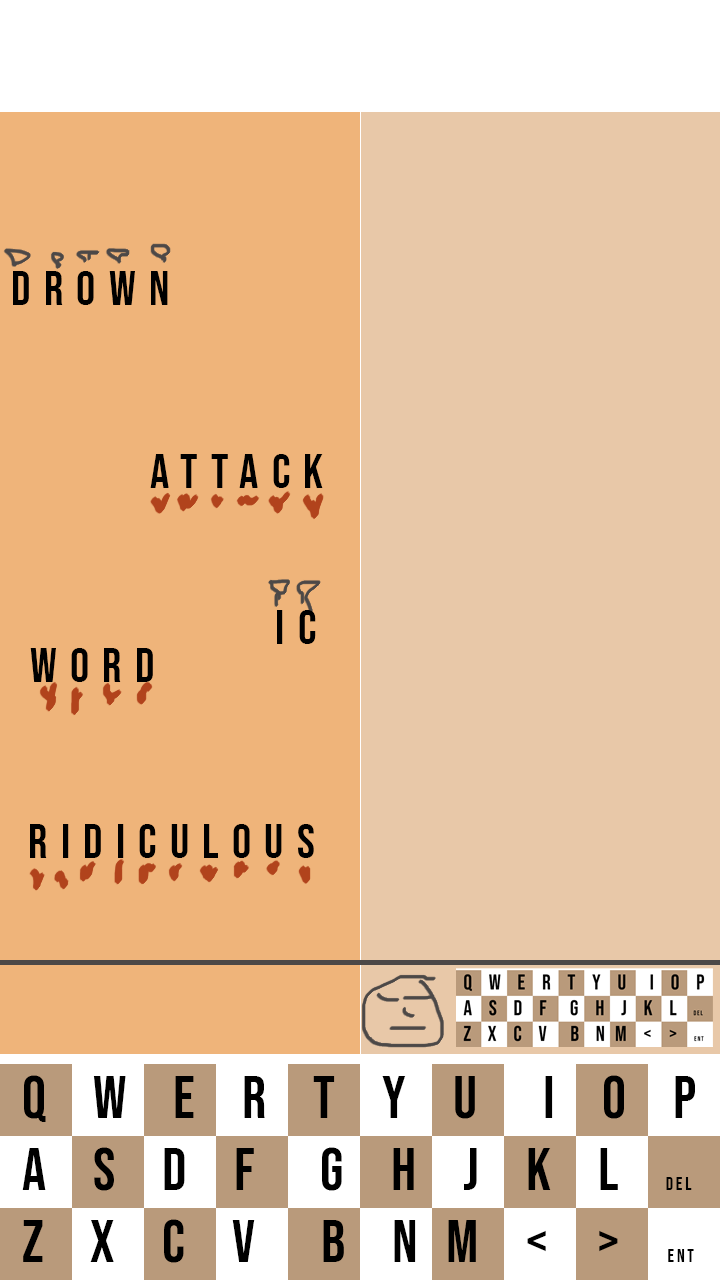
<style>
.page{position:relative;width:720px;height:1280px;background:#efb47a}
.page>*{position:absolute;margin:0}
.t1{font:48px "BebasNeue-Regular";letter-spacing:0.275em;color:#000000}
.t2{font:60px "BebasNeue-Regular";letter-spacing:0.155em;color:#000000}
.t3{font:18px "BebasNeue-Regular";letter-spacing:0.155em;color:#000000}
</style>
<div class="page">
<p class="t1" style="left:13px;top:271px;width:155px;height:34px">DROWN</p>
<p class="t1" style="left:150px;top:454px;width:173px;height:34px">ATTACK</p>
<p class="t1" style="left:277px;top:610px;width:39px;height:34px">IC</p>
<p class="t1" style="left:30px;top:648px;width:123px;height:34px">WORD</p>
<p class="t1" style="left:30px;top:824px;width:284px;height:34px">RIDICulous</p>
<p class="t2" style="left:22px;top:1075px;width:673px;height:188px">Q  W  E  R  T  Y  U   I  O  P<br>A  S  D  F   G  H  J  K  L  <span class="t3">deL<br></span>Z  X  C  V   B  N M  &lt;  &gt;  <span class="t3">ent</span></p>
</div>
